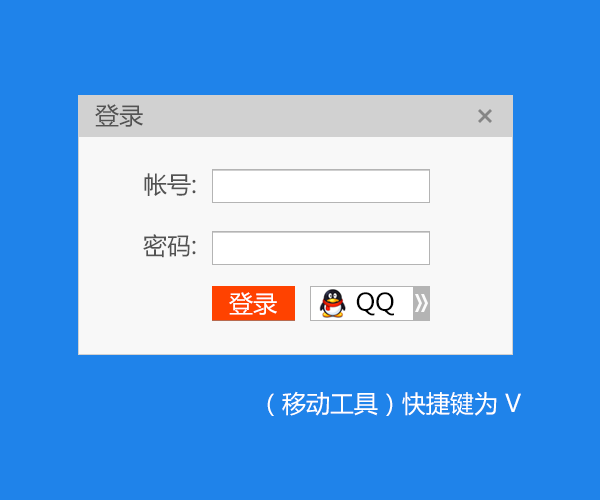
<style>
.page{position:relative;width:600px;height:500px;background:#1f83ea}
.page>*{position:absolute;margin:0}
.t1{font:24px "MicrosoftYaHei";color:#535353}
.t2{font:24px "MicrosoftYaHei";color:#ffffff}
.t3{font:24px "MicrosoftYaHei";color:#000000}
</style>
<div class="page">
<p class="t1" style="left:95px;top:104px;width:48px;height:23px">登录</p>
<p class="t1" style="left:144px;top:173px;width:52px;height:23px">帐号:</p>
<p class="t1" style="left:143px;top:234px;width:53px;height:24px">密码:</p>
<p class="t2" style="left:229px;top:292px;width:48px;height:23px">登录</p>
<p class="t3" style="left:356px;top:292px;width:38px;height:24px">QQ</p>
<p class="t2" style="left:267px;top:391px;width:254px;height:25px">（移动工具）快捷键为 V</p>
</div>
